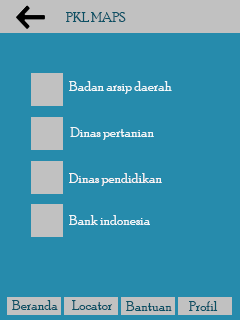
<style>
.page{position:relative;width:240px;height:320px;background:#268bac}
.page>*{position:absolute;margin:0}
.t1{font:14px "PoorRichard-Regular";color:#0b5064}
.t2{font:14px "PoorRichard-Regular";color:#f3f8f9}
.t3{font:14px "PoorRichard-Regular";color:#f2f7f8}
.t4{font:14px "PoorRichard-Regular";color:#faf4f4}
.t5{font:14px "PoorRichard-Regular";color:#f2f7f9}
</style>
<div class="page">
<p class="t1" style="left:66px;top:12px;width:60px;height:10px">PKL MAPS</p>
<p class="t2" style="left:69px;top:81px;width:103px;height:13px">Badan arsip daerah</p>
<p class="t3" style="left:70px;top:127px;width:84px;height:13px">Dinas pertanian</p>
<p class="t4" style="left:69px;top:173px;width:93px;height:13px">Dinas pendidikan</p>
<p class="t5" style="left:69px;top:215px;width:81px;height:10px">Bank indonesia</p>
<p class="t1" style="left:12px;top:300px;width:46px;height:10px">Beranda</p>
<p class="t1" style="left:72px;top:300px;width:40px;height:10px">Locator</p>
<p class="t1" style="left:126px;top:301px;width:46px;height:10px">Bantuan</p>
<p class="t1" style="left:189px;top:301px;width:29px;height:10px">Profil</p>
</div>
